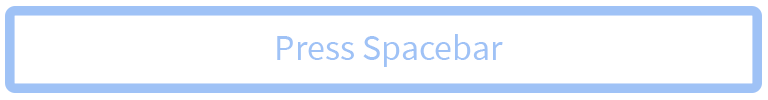
<style>
.page{position:relative;width:768px;height:100px;background:#ffffff}
.page>*{position:absolute;margin:0}
.t1{font:36px "SourceSansPro-Regular";color:#9fc2f6}
</style>
<div class="page">
<p class="t1" style="left:277px;top:34px;width:226px;height:33px">Press Spacebar</p>
</div>
